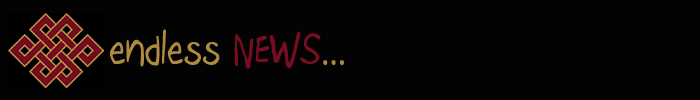
<style>
.page{position:relative;width:700px;height:100px;background:#040303}
.page>*{position:absolute;margin:0}
.t1{font:48px "Boopee";color:#af8b40}
.t2{font:48px "Boopee";color:#770d20}
</style>
<div class="page">
<p class="t1" style="left:110px;top:29px;width:234px;height:40px">endless <span class="t2">NEWS</span>...</p>
</div>
